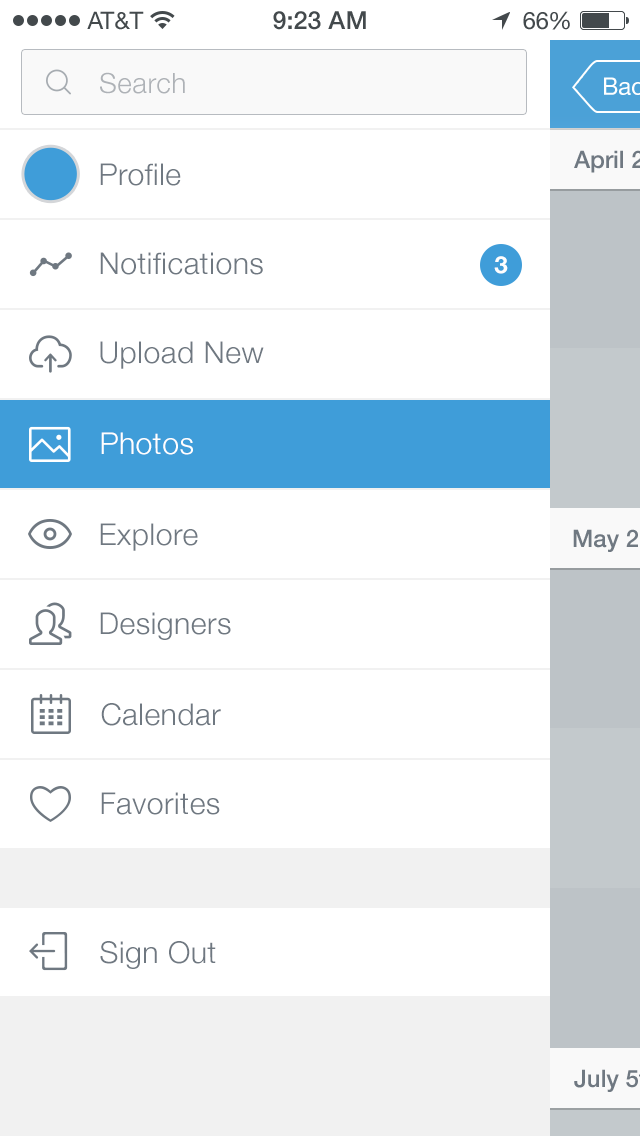
<style>
.page{position:relative;width:640px;height:1136px;background:#ffffff}
.page>*{position:absolute;margin:0}
.t1{font:24px "HelveticaNeue";color:#43494c}
.t2{font:25px "HelveticaNeue-Medium";color:#43494c}
.t3{font:24px "HelveticaNeue";letter-spacing:-0.02em;color:#43494c}
.t4{font:28px "HelveticaNeue-Light";letter-spacing:0.02em;color:#aeb2b7}
.t5{font:30px "HelveticaNeue-Light";letter-spacing:0.02em;color:#6f7881}
.t6{font:24px "HelveticaNeue-Bold";color:#fefefe}
.t7{font:30px "HelveticaNeue-Light";letter-spacing:0.02em;color:#ffffff}
</style>
<div class="page">
<p class="t1" style="left:87px;top:11px;width:57px;height:19px">AT&amp;T</p>
<p class="t2" style="left:273px;top:11px;width:93px;height:19px">9:23 AM</p>
<p class="t1" style="left:523px;top:11px;width:47px;height:19px">6<span class="t3">6</span>%</p>
<p class="t4" style="left:100px;top:72px;width:85px;height:22px">Search</p>
<p class="t5" style="left:100px;top:163px;width:81px;height:23px">Profile</p>
<p class="t5" style="left:100px;top:252px;width:163px;height:23px">Notifications</p>
<p class="t6" style="left:494px;top:256px;width:14px;height:18px">3</p>
<p class="t5" style="left:100px;top:341px;width:164px;height:28px">Upload New</p>
<p class="t7" style="left:101px;top:432px;width:92px;height:23px">Photos</p>
<p class="t5" style="left:100px;top:523px;width:98px;height:28px">Explore</p>
<p class="t5" style="left:100px;top:612px;width:131px;height:28px">Designers</p>
<p class="t5" style="left:101px;top:703px;width:120px;height:23px">Calendar</p>
<p class="t5" style="left:101px;top:792px;width:119px;height:23px">Favorites</p>
<p class="t5" style="left:100px;top:941px;width:116px;height:28px">Sign Out</p>
</div>
